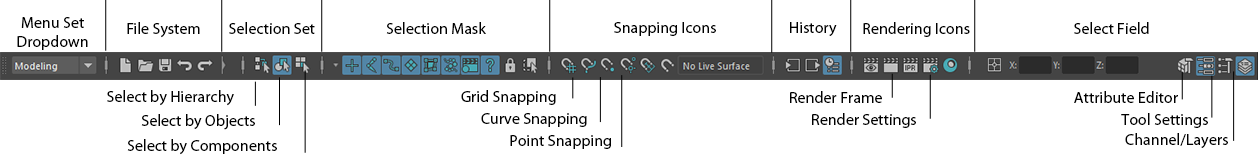
<style>
.page{position:relative;width:1258px;height:155px;background:#ffffff}
.page>*{position:absolute;margin:0}
.t1{font:16px "MyriadPro-Regular";color:#000000}
</style>
<div class="page">
<p class="t1" style="left:17px;top:17px;width:71px;height:33px;text-align:center">Menu Set<br>Dropdown</p>
<p class="t1" style="left:127px;top:22px;width:73px;height:16px">File System</p>
<p class="t1" style="left:229px;top:22px;width:86px;height:12px">Selection Set</p>
<p class="t1" style="left:386px;top:22px;width:100px;height:12px">Selection Mask</p>
<p class="t1" style="left:614px;top:22px;width:102px;height:14px">Snapping Icons</p>
<p class="t1" style="left:790px;top:22px;width:47px;height:14px">History</p>
<p class="t1" style="left:863px;top:22px;width:107px;height:15px">Rendering Icons</p>
<p class="t1" style="left:1074px;top:22px;width:75px;height:12px">Select Field</p>
<p class="t1" style="left:107px;top:90px;width:127px;height:16px">Select by Hierarchy</p>
<p class="t1" style="left:461px;top:90px;width:95px;height:15px">Grid Snapping</p>
<p class="t1" style="left:790px;top:91px;width:92px;height:12px">Render Frame</p>
<p class="t1" style="left:1074px;top:91px;width:104px;height:12px">Attribute Editor</p>
<p class="t1" style="left:481px;top:113px;width:106px;height:14px">Curve Snapping</p>
<p class="t1" style="left:812px;top:113px;width:104px;height:15px">Render Settings</p>
<p class="t1" style="left:1121px;top:113px;width:87px;height:15px">Tool Settings</p>
<p class="t1" style="left:141px;top:114px;width:114px;height:16px">Select by Objects</p>
<p class="t1" style="left:510px;top:135px;width:101px;height:14px">Point Snapping</p>
<p class="t1" style="left:1125px;top:133px;width:103px;height:15px">Channel/Layers</p>
<p class="t1" style="left:127px;top:139px;width:150px;height:16px">Select by Components</p>
</div>
